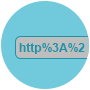
<style>
.page{position:relative;width:90px;height:90px;background:#70cadb}
.page>*{position:absolute;margin:0}
.t1{font:12px "Arial-BoldMT";color:#1d94aa}
</style>
<div class="page">
<p class="t1" style="left:19px;top:43px;width:66px;height:11px">http%3A%2F%2F</p>
</div>
